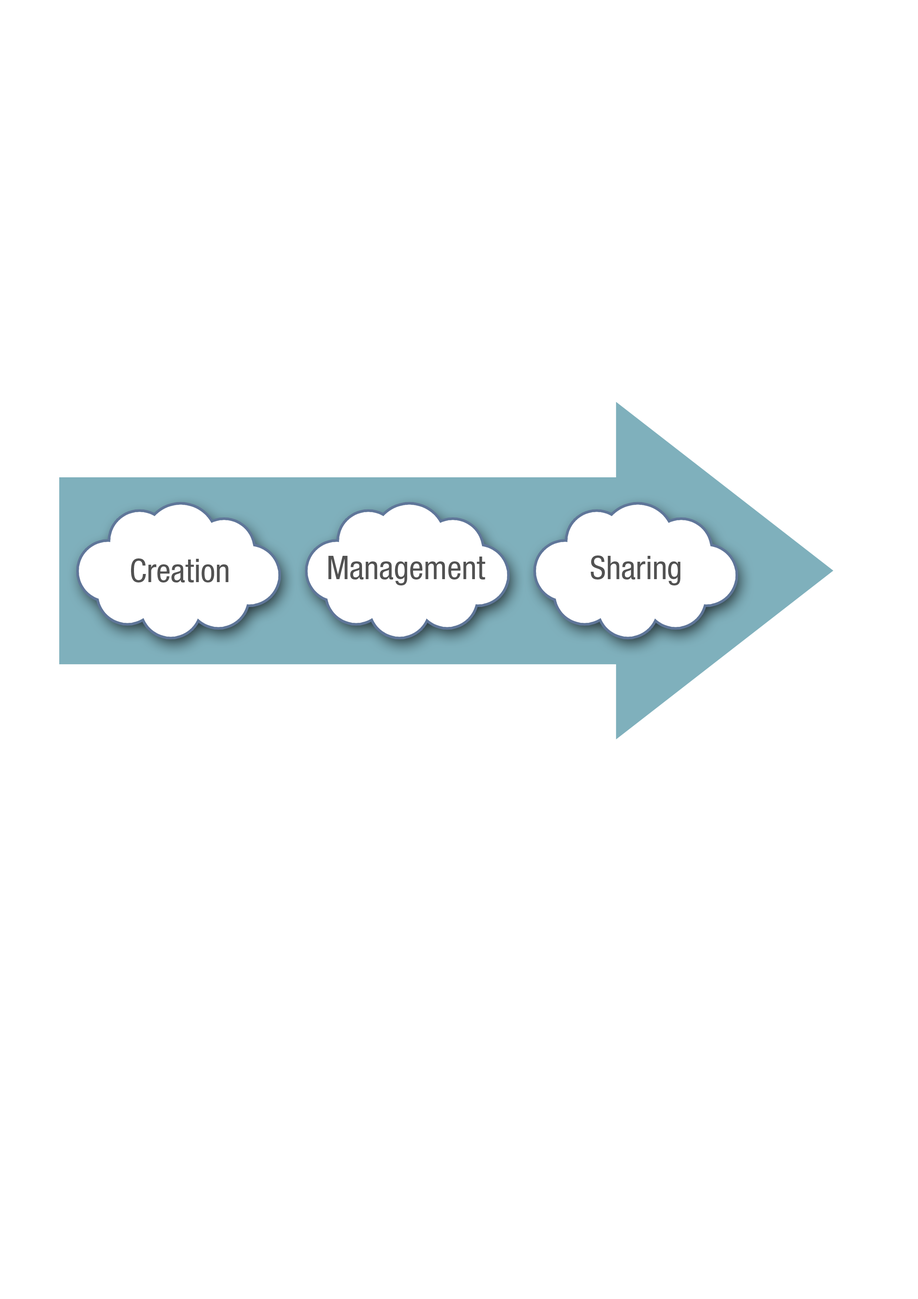
<style>
.page{position:relative;width:918px;height:1299px;background:#ffffff}
.page>*{position:absolute;margin:0}
.t1{font:32.7px "HelveticaNeueLTPro-Cn";color:#525252}
</style>
<div class="page">
<p class="t1" style="left:328px;top:556px;width:157px;height:29px">Management</p>
<p class="t1" style="left:591px;top:555px;width:89px;height:30px">Sharing</p>
<p class="t1" style="left:131px;top:558px;width:97px;height:24px">Creation</p>
</div>
